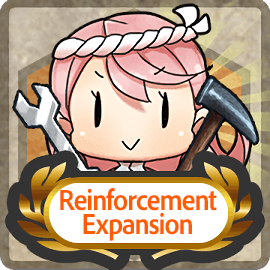
<style>
.page{position:relative;width:270px;height:270px}
.page>*{position:absolute;margin:0}
.t1{font:30px/24px "AdobeClean-Bold";letter-spacing:-0.04em;color:#ff5d00;scale:0.9 1}
</style>
<div class="page">
<p class="t1" style="left:60px;top:188px;width:157px;height:53px;text-align:center">Reinforcement<br>Expansion</p>
</div>
